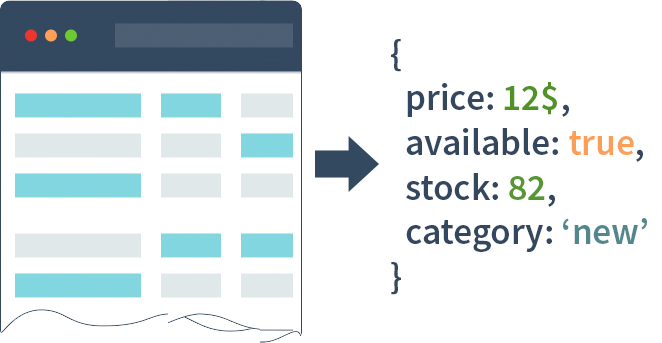
<style>
.page{position:relative;width:662px;height:343px;background:#ffffff}
.page>*{position:absolute;margin:0}
.t1{font:37.2px "SourceSansPro-Semibold";color:#33485e}
.t2{font:37.2px "SourceSansPro-Semibold";color:#4f9325}
.t3{font:37.2px "SourceSansPro-Semibold";color:#fd9e57}
.t4{font:37.2px "SourceSansPro-Semibold";color:#579731}
.t5{font:37.2px "SourceSansPro-Semibold";color:#52878d}
</style>
<div class="page">
<p class="t1" style="left:391px;top:39px;width:256px;height:256px">{<br>  price: <span class="t2">12$</span>,<br>  available: <span class="t3">true</span>,  <br>  stock: <span class="t4">82</span>,<br>  category: <span class="t5">‘new’<br></span>}</p>
</div>
